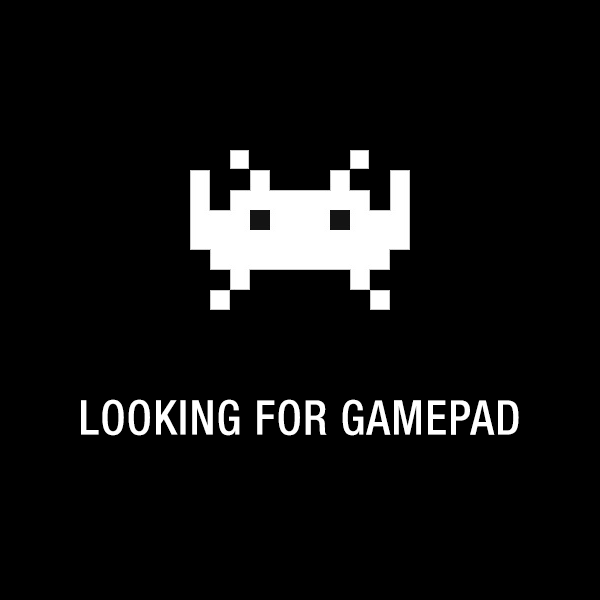
<style>
.page{position:relative;width:600px;height:600px;background:#000000}
.page>*{position:absolute;margin:0}
.t1{font:48px "HelveticaNeueLTStd-MdCn";letter-spacing:0.03em;color:#ffffff;scale:0.94 1}
</style>
<div class="page">
<p class="t1" style="left:81px;top:399px;width:438px;height:37px">LOOKING FOR GAMEPAD</p>
</div>
